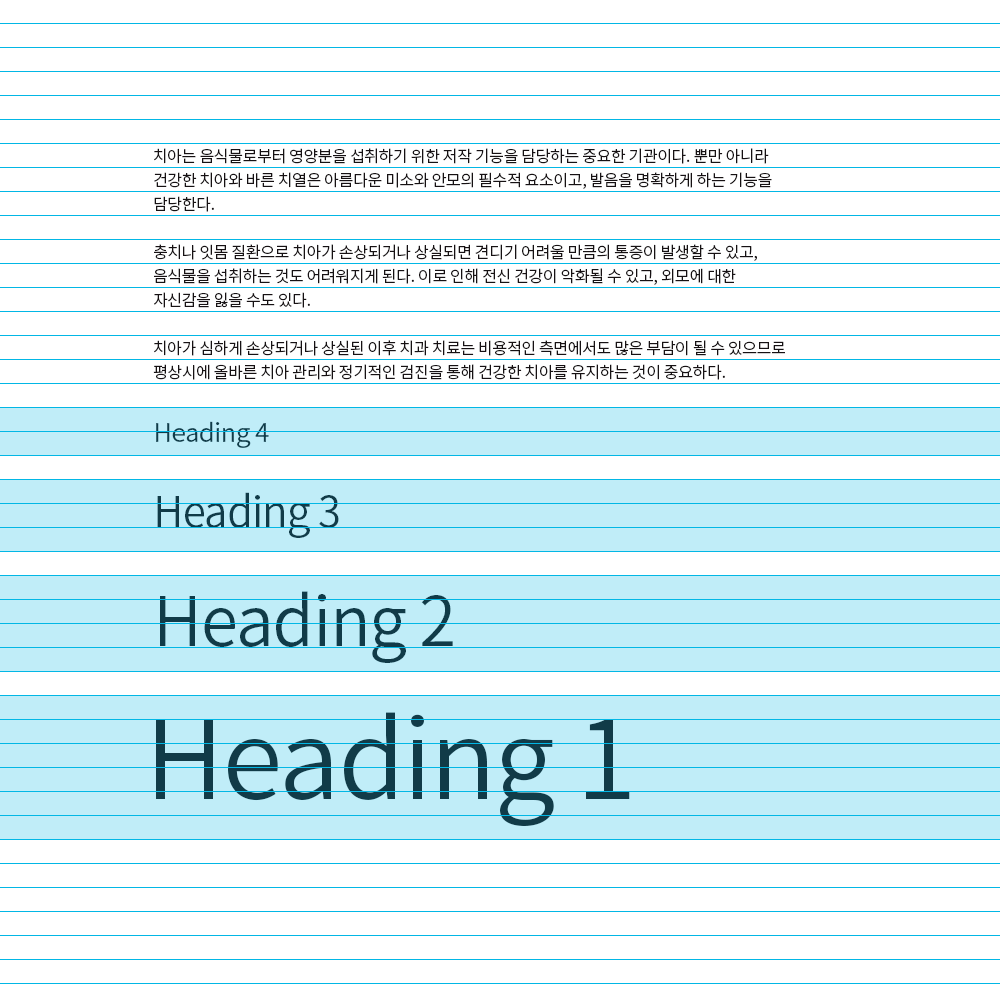
<style>
.page{position:relative;width:1000px;height:1000px;background:#ffffff}
.page>*{position:absolute;margin:0}
.t1{font:16px "SourceHanSansKR-Normal";letter-spacing:-0.02em;color:#161113}
.t2{font:25.9px "SourceHanSansKR-Normal";letter-spacing:-0.02em;color:#113b48}
.t3{font:41.9px "SourceHanSansKR-Normal";letter-spacing:-0.02em;color:#113b48}
.t4{font:67.8px "SourceHanSansKR-Normal";letter-spacing:-0.02em;color:#113b48}
.t5{font:109.7px "SourceHanSansKR-Normal";letter-spacing:-0.02em;color:#113b48}
</style>
<div class="page">
<p class="t1" style="left:153px;top:148px;width:632px;height:232px">치아는 음식물로부터 영양분을 섭취하기 위한 저작 기능을 담당하는 중요한 기관이다. 뿐만 아니라 건강한 치아와 바른 치열은 아름다운 미소와 안모의 필수적 요소이고, 발음을 명확하게 하는 기능을 담당한다. <br>충치나 잇몸 질환으로 치아가 손상되거나 상실되면 견디기 어려울 만큼의 통증이 발생할 수 있고, 음식물을 섭취하는 것도 어려워지게 된다. 이로 인해 전신 건강이 악화될 수 있고, 외모에 대한 자신감을 잃을 수도 있다.<br>치아가 심하게 손상되거나 상실된 이후 치과 치료는 비용적인 측면에서도 많은 부담이 될 수 있으므로 평상시에 올바른 치아 관리와 정기적인 검진을 통해 건강한 치아를 유지하는 것이 중요하다.</p>
<p class="t2" style="left:156px;top:421px;width:113px;height:27px">Heading 4</p>
<p class="t3" style="left:157px;top:492px;width:182px;height:46px">Heading 3</p>
<p class="t4" style="left:160px;top:591px;width:293px;height:72px">Heading 2</p>
<p class="t5" style="left:156px;top:712px;width:474px;height:114px">Heading 1</p>
</div>
